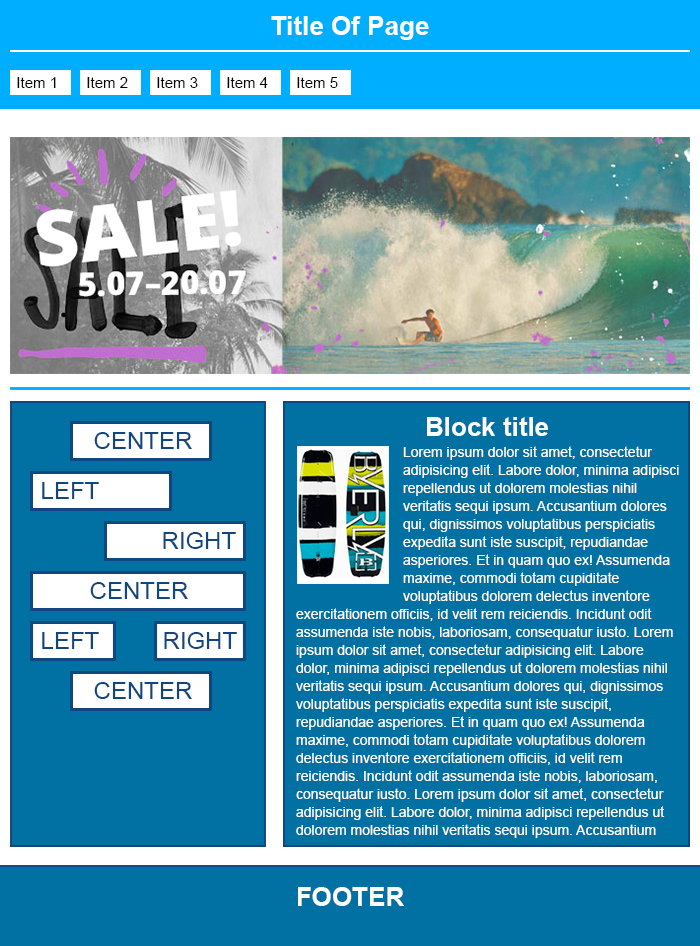
<style>
.page{position:relative;width:700px;height:946px;background:#0071a2}
.page>*{position:absolute;margin:0}
.t1{font:26px "Arial-BoldMT";color:#ffffff}
.t2{font:15px "ArialMT";color:#010101}
.t3{font:24px "ArialMT";color:#124680}
.t4{font:14px/18px "ArialMT";color:#ffffff}
</style>
<div class="page">
<p class="t1" style="left:271px;top:16px;width:158px;height:24px">Title Of Page</p>
<p class="t2" style="left:17px;top:77px;width:39px;height:11px">Item 1</p>
<p class="t2" style="left:87px;top:77px;width:41px;height:11px">Item 2</p>
<p class="t2" style="left:157px;top:77px;width:41px;height:11px">Item 3</p>
<p class="t2" style="left:227px;top:77px;width:41px;height:11px">Item 4</p>
<p class="t2" style="left:297px;top:77px;width:41px;height:11px">Item 5</p>
<p class="t1" style="left:427px;top:417px;width:121px;height:19px">Block title</p>
<p class="t3" style="left:94px;top:432px;width:98px;height:17px">CENTER</p>
<p class="t4" style="left:296px;top:446px;width:383px;height:392px">Lorem ipsum dolor sit amet, consectetur adipisicing elit. Labore dolor, minima adipisci repellendus ut dolorem molestias nihil veritatis sequi ipsum. Accusantium dolores qui, dignissimos voluptatibus perspiciatis expedita sunt iste suscipit, repudiandae asperiores. Et in quam quo ex! Assumenda maxime, commodi totam cupiditate voluptatibus dolorem delectus inventore exercitationem officiis, id velit rem reiciendis. Incidunt odit assumenda iste nobis, laboriosam, consequatur iusto. Lorem ipsum dolor sit amet, consectetur adipisicing elit. Labore dolor, minima adipisci repellendus ut dolorem molestias nihil veritatis sequi ipsum. Accusantium dolores qui, dignissimos voluptatibus perspiciatis expedita sunt iste suscipit, repudiandae asperiores. Et in quam quo ex! Assumenda maxime, commodi totam cupiditate voluptatibus dolorem delectus inventore exercitationem officiis, id velit rem reiciendis. Incidunt odit assumenda iste nobis, laboriosam, consequatur iusto. Lorem ipsum dolor sit amet, consectetur adipisicing elit. Labore dolor, minima adipisci repellendus ut dolorem molestias nihil veritatis sequi ipsum. Accusantium dolores qui, dignissimos voluptatibus perspiciatis expedita sunt iste suscipit, repudiandae asperiores. Et in quam quo ex! Assumenda maxime, commodi totam cupiditate voluptatibus dolorem delectus inventore exercitationem officiis, id velit rem reiciendis. Incidunt odit assumenda iste nobis, laboriosam, consequatur iusto.</p>
<p class="t3" style="left:42px;top:482px;width:57px;height:17px">LEFT</p>
<p class="t3" style="left:163px;top:532px;width:73px;height:17px">RIGHT</p>
<p class="t3" style="left:90px;top:582px;width:98px;height:17px">CENTER</p>
<p class="t3" style="left:42px;top:632px;width:57px;height:17px">LEFT</p>
<p class="t3" style="left:164px;top:632px;width:73px;height:17px">RIGHT</p>
<p class="t3" style="left:94px;top:682px;width:98px;height:17px">CENTER</p>
<p class="t1" style="left:298px;top:887px;width:106px;height:19px">FOOTER</p>
</div>
